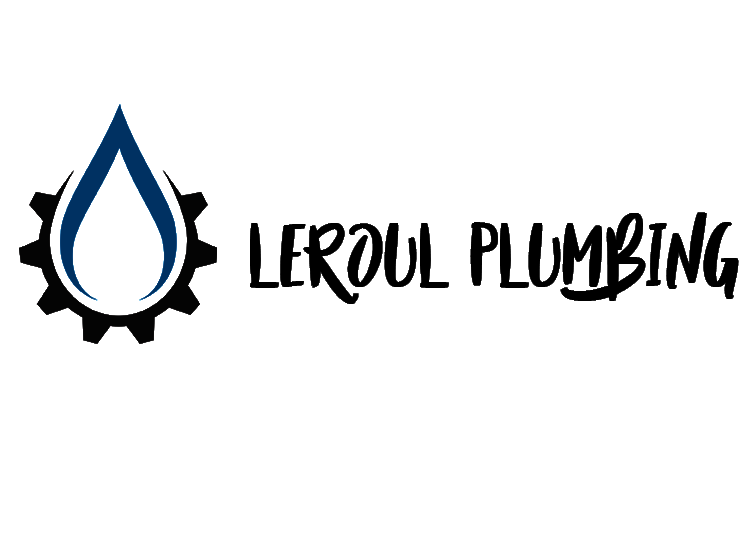
<style>
.page{position:relative;width:741px;height:539px;background:#ffffff}
.page>*{position:absolute;margin:0}
.t1{font:63px "BeautyandtheBeast";letter-spacing:0.03em;color:#000000;font-weight:bold}
</style>
<div class="page">
<p class="t1" style="left:250px;top:212px;width:489px;height:92px">Leroul Plumbing</p>
</div>
